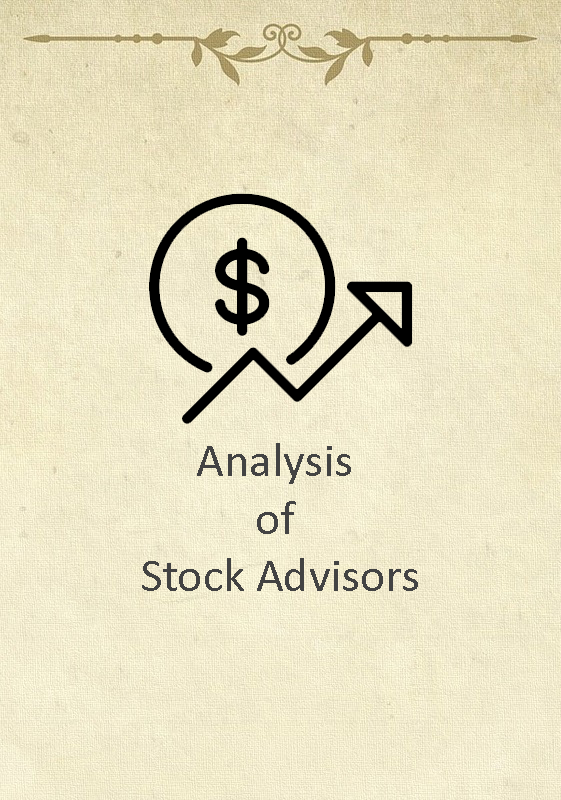
<style>
.page{position:relative;width:561px;height:800px}
.page>*{position:absolute;margin:0}
.t1{font:48px "Calibri";color:#434343}
</style>
<div class="page">
<p class="t1" style="left:142px;top:443px;width:276px;height:148px;text-align:center">Analysis <br>of <br>Stock Advisors</p>
</div>
